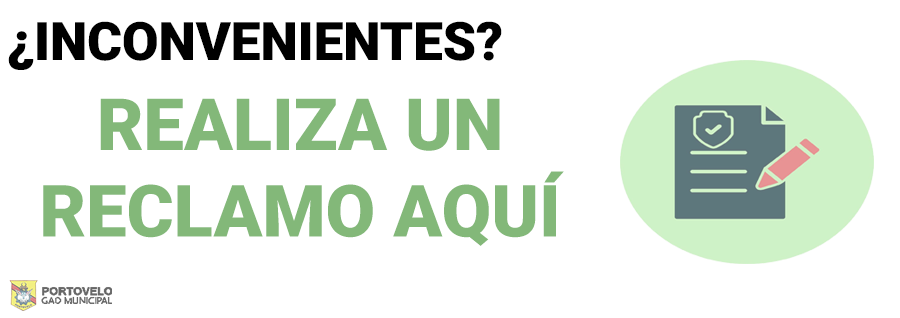
<style>
.page{position:relative;width:900px;height:318px;background:#ffffff}
.page>*{position:absolute;margin:0}
.t1{font:53px "Roboto-Black";color:#000000}
.t2{font:72px "Roboto-Black";color:#83b879}
</style>
<div class="page">
<p class="t1" style="left:8px;top:21px;width:494px;height:49px">¿INCONVENIENTES?</p>
<p class="t2" style="left:43px;top:98px;width:521px;height:148px;text-align:center">REALIZA UN <br>RECLAMO AQUÍ</p>
</div>
